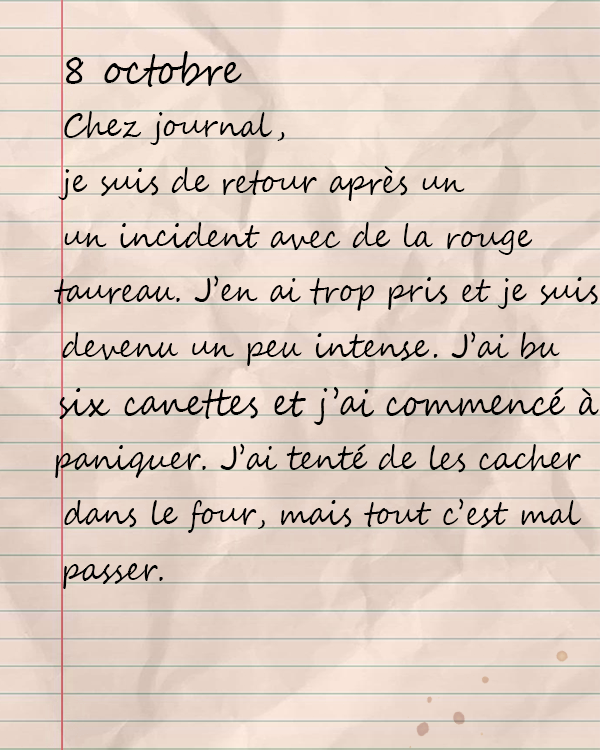
<style>
.page{position:relative;width:600px;height:750px}
.page>*{position:absolute;margin:0}
.t1{font:41.8px "SegoeScript";color:#000000;scale:0.9 1}
.t2{font:33.3px "SegoeScript";color:#000000;scale:0.9 1}
</style>
<div class="page">
<p class="t1" style="left:66px;top:51px;width:176px;height:36px">8 octobre</p>
<p class="t2" style="left:64px;top:111px;width:221px;height:34px">Chez journal,</p>
<p class="t2" style="left:58px;top:166px;width:407px;height:35px">je suis de retour après un</p>
<p class="t2" style="left:64px;top:222px;width:469px;height:33px">un incident avec de la rouge</p>
<p class="t2" style="left:54px;top:275px;width:544px;height:36px">taureau. J’en ai trop pris et je suis</p>
<p class="t2" style="left:62px;top:331px;width:498px;height:35px">devenu un peu intense. J’ai bu</p>
<p class="t2" style="left:59px;top:386px;width:540px;height:39px">six canettes et j’ai commencé à</p>
<p class="t2" style="left:55px;top:443px;width:526px;height:35px">paniquer. J’ai tenté de les cacher</p>
<p class="t2" style="left:64px;top:498px;width:518px;height:35px">dans le four, mais tout c’est mal</p>
<p class="t2" style="left:63px;top:563px;width:100px;height:26px">passer.</p>
</div>
